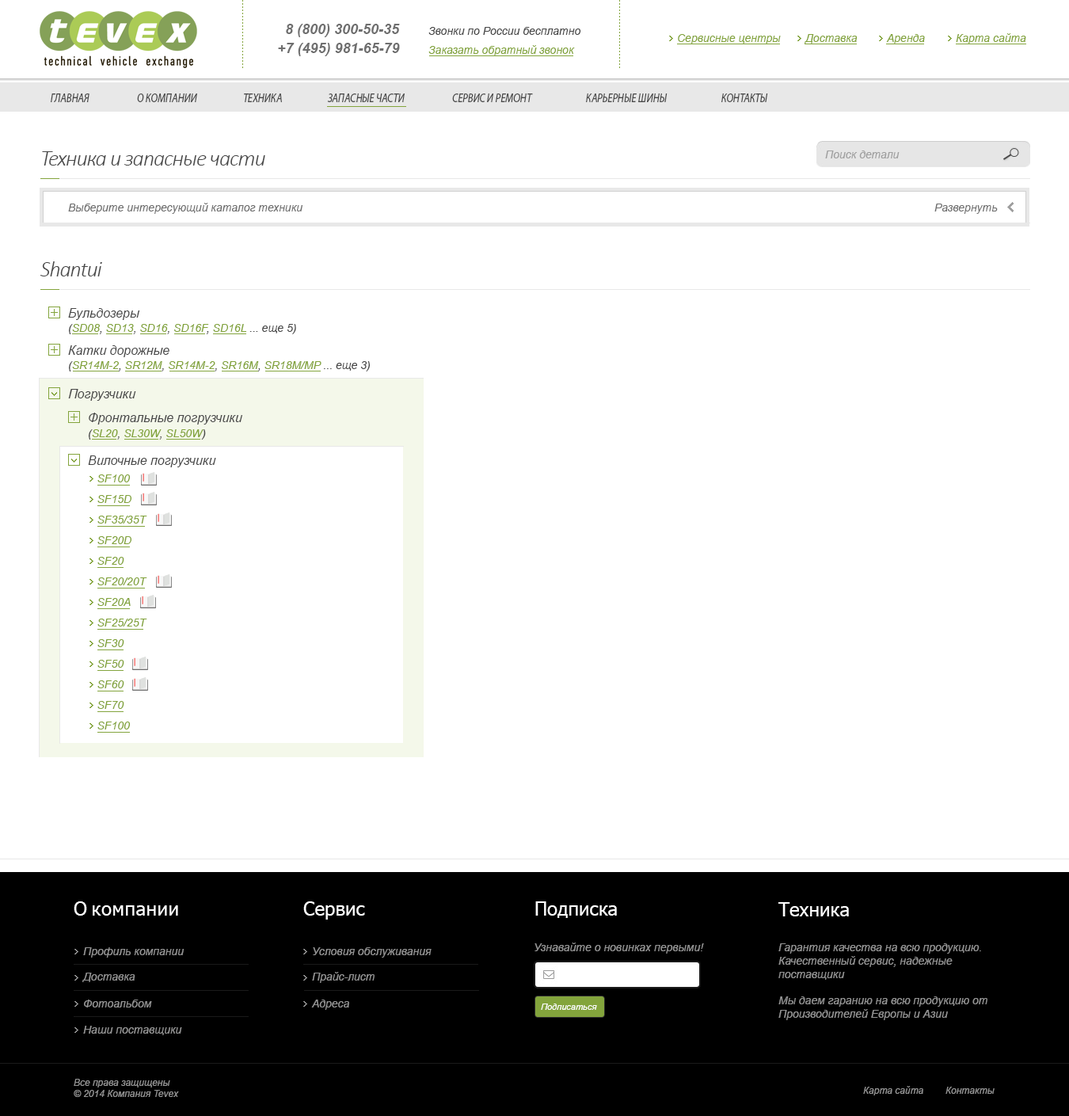
<style>
.page{position:relative;width:1069px;height:1116px;background:#ffffff}
.page>*{position:absolute;margin:0}
.t1{font:14.3px "Arial-BoldItalicMT";color:#6f6f6f}
.t2{font:11.1px "Arial-ItalicMT";color:#484848}
.t3{font:11.1px "Arial-ItalicMT";color:#83a43c}
.t4{font:12.9px "MyriadPro-It";color:#484848;scale:0.79 1}
.t5{font:22.2px "Calibri-LightItalic";letter-spacing:-0.04em;color:#484848}
.t6{font:11.1px "Arial-ItalicMT";color:#a0a0a0}
.t7{font:11.1px "Arial-ItalicMT";color:#6f6f6f}
.t8{font:12.7px "Arial-ItalicMT";color:#484848}
.t9{font:19px "Tahoma";letter-spacing:0.02em;color:#ffffff}
.t10{font:19px "Tahoma";color:#ffffff}
.t11{font:11.1px "Arial-ItalicMT";color:#939393}
.t12{font:8.7px "Arial-ItalicMT";color:#ffffff}
.t13{font:9.5px "Arial-ItalicMT";color:#939393}
</style>
<div class="page">
<p class="t1" style="left:286px;top:24px;width:114px;height:13px">8 (800) 300-50-35</p>
<p class="t2" style="left:428px;top:27px;width:153px;height:8px">Звонки по России бесплатно</p>
<p class="t3" style="left:678px;top:34px;width:103px;height:10px">Сервисные центры</p>
<p class="t3" style="left:804px;top:34px;width:53px;height:10px">Доставка</p>
<p class="t3" style="left:886px;top:34px;width:39px;height:10px">Аренда</p>
<p class="t3" style="left:956px;top:33px;width:70px;height:11px">Карта сайта</p>
<p class="t1" style="left:278px;top:43px;width:122px;height:13px">+7 (495) 981-65-79</p>
<p class="t3" style="left:428px;top:45px;width:147px;height:11px">Заказать обратный звонок</p>
<p class="t4" style="left:51px;top:93px;width:38px;height:9px">ГЛАВНАЯ</p>
<p class="t4" style="left:137px;top:93px;width:60px;height:9px">О КОМПАНИИ</p>
<p class="t4" style="left:244px;top:93px;width:38px;height:9px">ТЕХНИКА</p>
<p class="t4" style="left:327px;top:93px;width:78px;height:9px">ЗАПАСНЫЕ ЧАСТИ</p>
<p class="t4" style="left:452px;top:93px;width:81px;height:9px">СЕРВИС И РЕМОНТ</p>
<p class="t4" style="left:586px;top:93px;width:81px;height:9px">КАРЬЕРНЫЕ ШИНЫ</p>
<p class="t4" style="left:721px;top:93px;width:47px;height:9px">КОНТАКТЫ</p>
<p class="t5" style="left:42px;top:151px;width:223px;height:14px">Техника и запасные части</p>
<p class="t6" style="left:825px;top:150px;width:74px;height:8px">Поиск детали</p>
<p class="t7" style="left:68px;top:203px;width:235px;height:11px">Выберите интересующий каталог техники</p>
<p class="t7" style="left:934px;top:203px;width:64px;height:11px">Развернуть</p>
<p class="t5" style="left:40px;top:261px;width:62px;height:15px">Shantui</p>
<p class="t8" style="left:68px;top:308px;width:72px;height:12px">Бульдозеры</p>
<p class="t2" style="left:69px;top:324px;width:227px;height:10px">(<span class="t3">SD08</span>, <span class="t3">SD13</span>, <span class="t3">SD16</span>, <span class="t3">SD16F</span>, <span class="t3">SD16L </span>... еще 5)</p>
<p class="t8" style="left:68px;top:345px;width:101px;height:12px">Катки дорожные</p>
<p class="t2" style="left:69px;top:361px;width:301px;height:10px">(<span class="t3">SR14M-2</span>, <span class="t3">SR12M</span>, <span class="t3">SR14M-2</span>, <span class="t3">SR16M</span>, <span class="t3">SR18M/MP </span>... еще 3)</p>
<p class="t8" style="left:68px;top:389px;width:68px;height:12px">Погрузчики</p>
<p class="t8" style="left:89px;top:413px;width:153px;height:11px">Фронтальные погрузчики</p>
<p class="t3" style="left:89px;top:429px;width:117px;height:10px"><span class="t2">(</span>SL20<span class="t2">, </span>SL30W<span class="t2">, </span>SL50W<span class="t2">)</span></p>
<p class="t8" style="left:88px;top:455px;width:128px;height:12px">Вилочные погрузчики</p>
<p class="t3" style="left:97px;top:474px;width:34px;height:8px">SF100</p>
<p class="t3" style="left:97px;top:495px;width:34px;height:8px">SF15D</p>
<p class="t3" style="left:97px;top:515px;width:50px;height:8px">SF35/35T</p>
<p class="t3" style="left:97px;top:536px;width:34px;height:8px">SF20D</p>
<p class="t3" style="left:97px;top:557px;width:27px;height:8px">SF20</p>
<p class="t3" style="left:97px;top:577px;width:50px;height:8px">SF20/20T</p>
<p class="t3" style="left:97px;top:598px;width:34px;height:8px">SF20A</p>
<p class="t3" style="left:97px;top:618px;width:50px;height:8px">SF25/25T</p>
<p class="t3" style="left:97px;top:639px;width:27px;height:8px">SF30</p>
<p class="t3" style="left:97px;top:660px;width:27px;height:7px">SF50</p>
<p class="t3" style="left:97px;top:680px;width:27px;height:8px">SF60</p>
<p class="t3" style="left:97px;top:701px;width:27px;height:8px">SF70</p>
<p class="t3" style="left:97px;top:721px;width:34px;height:8px">SF100</p>
<p class="t9" style="left:74px;top:901px;width:104px;height:14px"><span class="t10">О </span>компании</p>
<p class="t10" style="left:303px;top:901px;width:62px;height:18px">Сервис</p>
<p class="t10" style="left:535px;top:901px;width:82px;height:17px">Подписка</p>
<p class="t10" style="left:778px;top:902px;width:71px;height:14px">Техника</p>
<p class="t11" style="left:83px;top:947px;width:101px;height:10px">Профиль компании</p>
<p class="t11" style="left:313px;top:947px;width:119px;height:10px">Условия обслуживания</p>
<p class="t11" style="left:534px;top:942px;width:170px;height:11px">Узнавайте о новинках первыми!</p>
<p class="t11" style="left:778px;top:943px;width:209px;height:77px">Гарантия качества на всю продукцию.<br>Качественный сервис, надежные <br>поставщики<br><br>Мы даем гаранию на всю продукцию от <br>Производителей Европы и Азии</p>
<p class="t11" style="left:82px;top:972px;width:53px;height:10px">Доставка</p>
<p class="t11" style="left:312px;top:971px;width:63px;height:12px">Прайс-лист</p>
<p class="t11" style="left:84px;top:999px;width:68px;height:8px">Фотоальбом</p>
<p class="t11" style="left:311px;top:999px;width:38px;height:10px">Адреса</p>
<p class="t12" style="left:541px;top:1003px;width:56px;height:6px">Подписаться</p>
<p class="t11" style="left:83px;top:1025px;width:99px;height:10px">Наши поставщики</p>
<p class="t13" style="left:74px;top:1078px;width:105px;height:19px">Все права защищены<br>© 2014 Компания Tevex</p>
<p class="t13" style="left:863px;top:1086px;width:60px;height:9px">Карта сайта</p>
<p class="t13" style="left:945px;top:1086px;width:49px;height:7px">Контакты</p>
</div>
